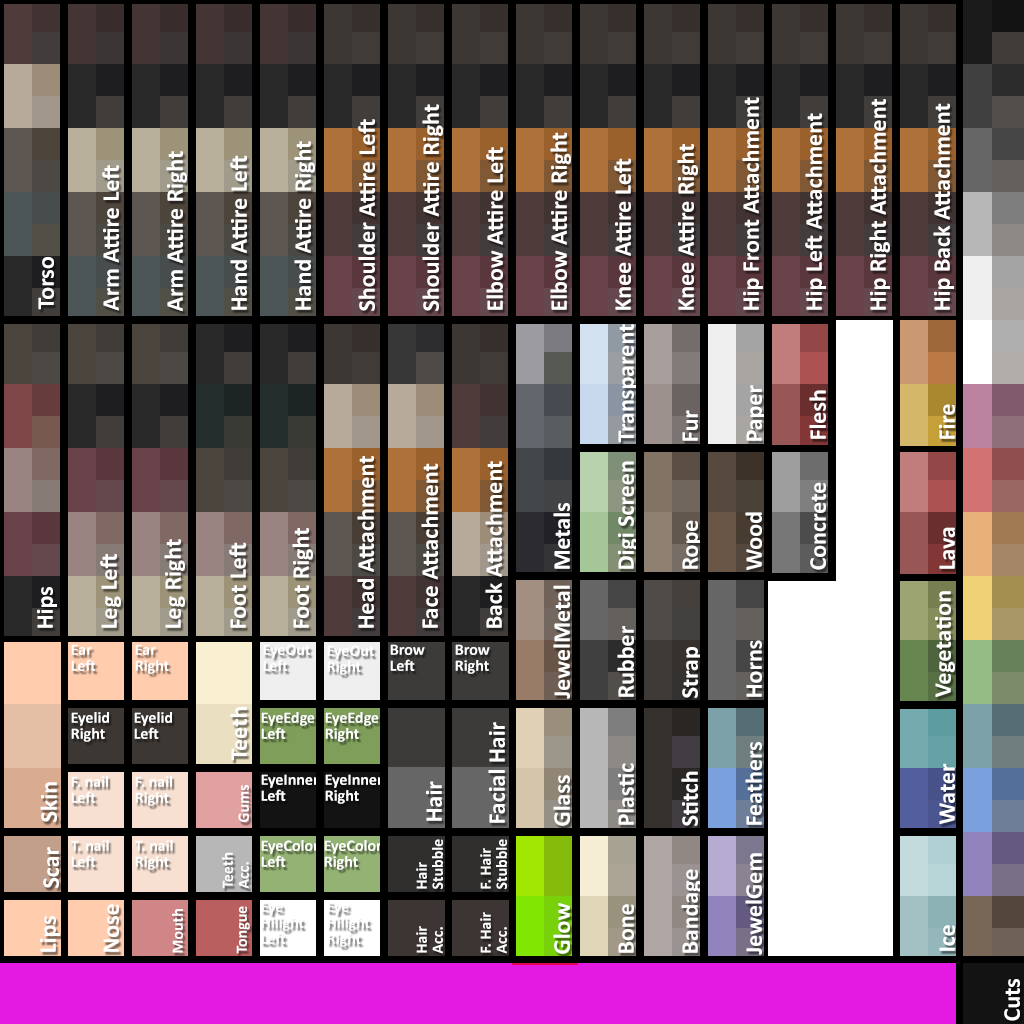
<style>
.page{position:relative;width:1024px;height:1024px}
.page>*{position:absolute;margin:0}
.t1{font:24px "Calibri-Bold";color:#ffffff}
.t2{font:16px/16px "Calibri-Bold";color:#ffffff}
.t3{font:16px "Calibri-Bold";color:#ffffff}
</style>
<div class="page">
<p class="t1" style="left:742px;top:97px;width:21px;height:213px;rotate:-90deg">Hip Front Attachment</p>
<p class="t1" style="left:869px;top:99px;width:21px;height:211px;rotate:-90deg">Hip Right Attachment</p>
<p class="t1" style="left:422px;top:104px;width:21px;height:207px;rotate:-90deg">Shoulder Attire Right</p>
<p class="t1" style="left:805px;top:113px;width:21px;height:197px;rotate:-90deg">Hip Left Attachment</p>
<p class="t1" style="left:933px;top:103px;width:21px;height:207px;rotate:-90deg">Hip Back Attachment</p>
<p class="t1" style="left:358px;top:119px;width:17px;height:192px;rotate:-90deg">Shoulder Attire Left</p>
<p class="t1" style="left:550px;top:132px;width:21px;height:178px;rotate:-90deg">Elbow Attire Right</p>
<p class="t1" style="left:294px;top:141px;width:21px;height:169px;rotate:-90deg">Hand Attire Right</p>
<p class="t1" style="left:486px;top:147px;width:17px;height:163px;rotate:-90deg">Elbow Attire Left</p>
<p class="t1" style="left:677px;top:144px;width:21px;height:166px;rotate:-90deg">Knee Attire Right</p>
<p class="t1" style="left:166px;top:151px;width:21px;height:161px;rotate:-90deg">Arm Attire Right</p>
<p class="t1" style="left:230px;top:155px;width:17px;height:155px;rotate:-90deg">Hand Attire Left</p>
<p class="t1" style="left:614px;top:158px;width:17px;height:152px;rotate:-90deg">Knee Attire Left</p>
<p class="t1" style="left:102px;top:165px;width:17px;height:146px;rotate:-90deg">Arm Attire Left</p>
<p class="t1" style="left:38px;top:257px;width:16px;height:53px;rotate:-90deg">Torso</p>
<p class="t1" style="left:618px;top:324px;width:20px;height:119px;rotate:-90deg">Transparent</p>
<p class="t1" style="left:746px;top:385px;width:20px;height:56px;rotate:-90deg">Paper</p>
<p class="t1" style="left:809px;top:390px;width:17px;height:49px;rotate:-90deg">Flesh</p>
<p class="t1" style="left:682px;top:410px;width:16px;height:31px;rotate:-90deg">Fur</p>
<p class="t1" style="left:939px;top:404px;width:16px;height:35px;rotate:-90deg">Fire</p>
<p class="t1" style="left:357px;top:456px;width:17px;height:172px;rotate:-90deg">Head Attachment</p>
<p class="t1" style="left:485px;top:461px;width:17px;height:167px;rotate:-90deg">Back Attachment</p>
<p class="t1" style="left:618px;top:461px;width:20px;height:108px;rotate:-90deg">Digi Screen</p>
<p class="t1" style="left:421px;top:463px;width:17px;height:165px;rotate:-90deg">Face Attachment</p>
<p class="t1" style="left:810px;top:482px;width:16px;height:88px;rotate:-90deg">Concrete</p>
<p class="t1" style="left:553px;top:503px;width:17px;height:66px;rotate:-90deg">Metals</p>
<p class="t1" style="left:682px;top:520px;width:20px;height:49px;rotate:-90deg">Rope</p>
<p class="t1" style="left:745px;top:512px;width:17px;height:58px;rotate:-90deg">Wood</p>
<p class="t1" style="left:292px;top:528px;width:21px;height:100px;rotate:-90deg">Foot Right</p>
<p class="t1" style="left:939px;top:527px;width:16px;height:42px;rotate:-90deg">Lava</p>
<p class="t1" style="left:164px;top:539px;width:21px;height:89px;rotate:-90deg">Leg Right</p>
<p class="t1" style="left:229px;top:542px;width:17px;height:86px;rotate:-90deg">Foot Left</p>
<p class="t1" style="left:100px;top:554px;width:21px;height:74px;rotate:-90deg">Leg Left</p>
<p class="t1" style="left:37px;top:587px;width:20px;height:41px;rotate:-90deg">Hips</p>
<p class="t1" style="left:553px;top:585px;width:17px;height:114px;rotate:-90deg">JewelMetal</p>
<p class="t1" style="left:935px;top:591px;width:20px;height:106px;rotate:-90deg">Vegetation</p>
<p class="t1" style="left:617px;top:626px;width:17px;height:71px;rotate:-90deg">Rubber</p>
<p class="t1" style="left:746px;top:640px;width:16px;height:57px;rotate:-90deg">Horns</p>
<p class="t2" style="left:71px;top:644px;width:25px;height:27px">Ear <br>Left</p>
<p class="t2" style="left:135px;top:644px;width:34px;height:30px">Ear <br>Right</p>
<p class="t2" style="left:263px;top:644px;width:47px;height:27px">EyeOut<br>Left</p>
<p class="t2" style="left:327px;top:645px;width:47px;height:30px">EyeOut<br>Right</p>
<p class="t2" style="left:390px;top:644px;width:35px;height:27px">Brow<br>Left</p>
<p class="t2" style="left:455px;top:644px;width:35px;height:30px">Brow<br>Right</p>
<p class="t1" style="left:682px;top:647px;width:20px;height:51px;rotate:-90deg">Strap</p>
<p class="t2" style="left:71px;top:712px;width:38px;height:30px">Eyelid<br>Right</p>
<p class="t2" style="left:134px;top:712px;width:38px;height:27px">Eyelid<br>Left</p>
<p class="t1" style="left:230px;top:707px;width:17px;height:54px;rotate:-90deg">Teeth</p>
<p class="t2" style="left:261px;top:712px;width:54px;height:27px">EyeEdge<br>Left</p>
<p class="t2" style="left:325px;top:712px;width:54px;height:30px">EyeEdge<br>Right</p>
<p class="t1" style="left:488px;top:722px;width:17px;height:101px;rotate:-90deg">Facial Hair</p>
<p class="t1" style="left:745px;top:742px;width:17px;height:83px;rotate:-90deg">Feathers</p>
<p class="t2" style="left:261px;top:774px;width:58px;height:27px">EyeInner<br>Left</p>
<p class="t2" style="left:325px;top:774px;width:58px;height:30px">EyeInner<br>Right</p>
<p class="t1" style="left:617px;top:763px;width:17px;height:62px;rotate:-90deg">Plastic</p>
<p class="t1" style="left:681px;top:771px;width:17px;height:55px;rotate:-90deg">Stitch</p>
<p class="t1" style="left:939px;top:763px;width:16px;height:61px;rotate:-90deg">Water</p>
<p class="t1" style="left:40px;top:782px;width:17px;height:40px;rotate:-90deg">Skin</p>
<p class="t2" style="left:71px;top:776px;width:37px;height:27px">F. nail <br>Left</p>
<p class="t2" style="left:135px;top:776px;width:37px;height:30px">F. nail <br>Right</p>
<p class="t3" style="left:238px;top:785px;width:11px;height:37px;rotate:-90deg">Gums</p>
<p class="t1" style="left:426px;top:781px;width:16px;height:40px;rotate:-90deg">Hair</p>
<p class="t1" style="left:553px;top:775px;width:17px;height:51px;rotate:-90deg">Glass</p>
<p class="t2" style="left:71px;top:840px;width:38px;height:27px">T. nail <br>Left</p>
<p class="t2" style="left:135px;top:840px;width:38px;height:30px">T. nail <br>Right</p>
<p class="t2" style="left:261px;top:840px;width:58px;height:27px">EyeColor<br>Left</p>
<p class="t2" style="left:324px;top:840px;width:58px;height:30px">EyeColor<br>Right</p>
<p class="t2" style="left:416px;top:839px;width:27px;height:50px;rotate:-90deg">Hair<br>Stubble</p>
<p class="t2" style="left:480px;top:839px;width:27px;height:50px;rotate:-90deg">F. Hair<br>Stubble</p>
<p class="t1" style="left:43px;top:847px;width:16px;height:41px;rotate:-90deg">Scar</p>
<p class="t2" style="left:222px;top:852px;width:27px;height:37px;rotate:-90deg">Teeth<br>Acc.</p>
<p class="t1" style="left:745px;top:853px;width:17px;height:102px;rotate:-90deg">JewelGem</p>
<p class="t1" style="left:681px;top:869px;width:21px;height:84px;rotate:-90deg">Bandage</p>
<p class="t1" style="left:103px;top:904px;width:16px;height:48px;rotate:-90deg">Nose</p>
<p class="t1" style="left:553px;top:903px;width:17px;height:51px;rotate:-90deg">Glow</p>
<p class="t1" style="left:618px;top:904px;width:16px;height:49px;rotate:-90deg">Bone</p>
<p class="t1" style="left:40px;top:916px;width:20px;height:36px;rotate:-90deg">Lips</p>
<p class="t3" style="left:172px;top:909px;width:11px;height:44px;rotate:-90deg">Mouth</p>
<p class="t3" style="left:236px;top:906px;width:14px;height:48px;rotate:-90deg">Tongue</p>
<p class="t2" style="left:480px;top:912px;width:27px;height:42px;rotate:-90deg">F. Hair<br>Acc.</p>
<p class="t2" style="left:416px;top:926px;width:27px;height:28px;rotate:-90deg">Hair<br>Acc.</p>
<p class="t1" style="left:939px;top:925px;width:16px;height:26px;rotate:-90deg">Ice</p>
<p class="t1" style="left:1004px;top:979px;width:16px;height:42px;rotate:-90deg">Cuts</p>
</div>
